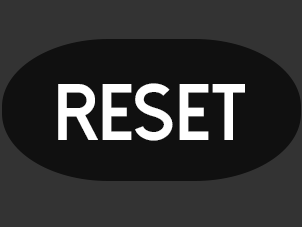
<style>
.page{position:relative;width:302px;height:227px;background:#333333}
.page>*{position:absolute;margin:0}
.t1{font:80px "DolceVitaHeavy-Bold";color:#ffffff}
</style>
<div class="page">
<p class="t1" style="left:58px;top:83px;width:187px;height:58px">Reset</p>
</div>
